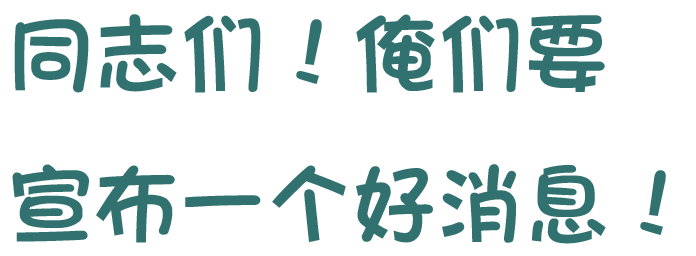
<style>
.page{position:relative;width:696px;height:256px;background:#ffffff}
.page>*{position:absolute;margin:0}
.t1{font:86px "DFFangYuanW7";color:#317270}
</style>
<div class="page">
<p class="t1" style="left:12px;top:14px;width:654px;height:230px">同志们！俺们要<br>宣布一个好消息！</p>
</div>
